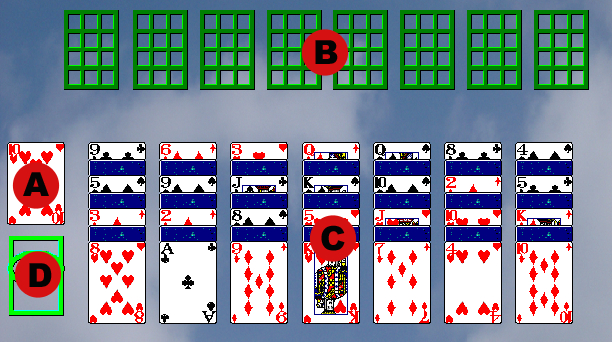
<style>
.page{position:relative;width:612px;height:342px}
.page>*{position:absolute;margin:0}
.t1{font:33.3px "Arial-Black";color:#030303}
</style>
<div class="page">
<p class="t1" style="left:315px;top:40px;width:23px;height:24px">B</p>
<p class="t1" style="left:23px;top:172px;width:26px;height:24px">A</p>
<p class="t1" style="left:321px;top:225px;width:24px;height:26px">C</p>
<p class="t1" style="left:29px;top:263px;width:23px;height:24px">D</p>
</div>
